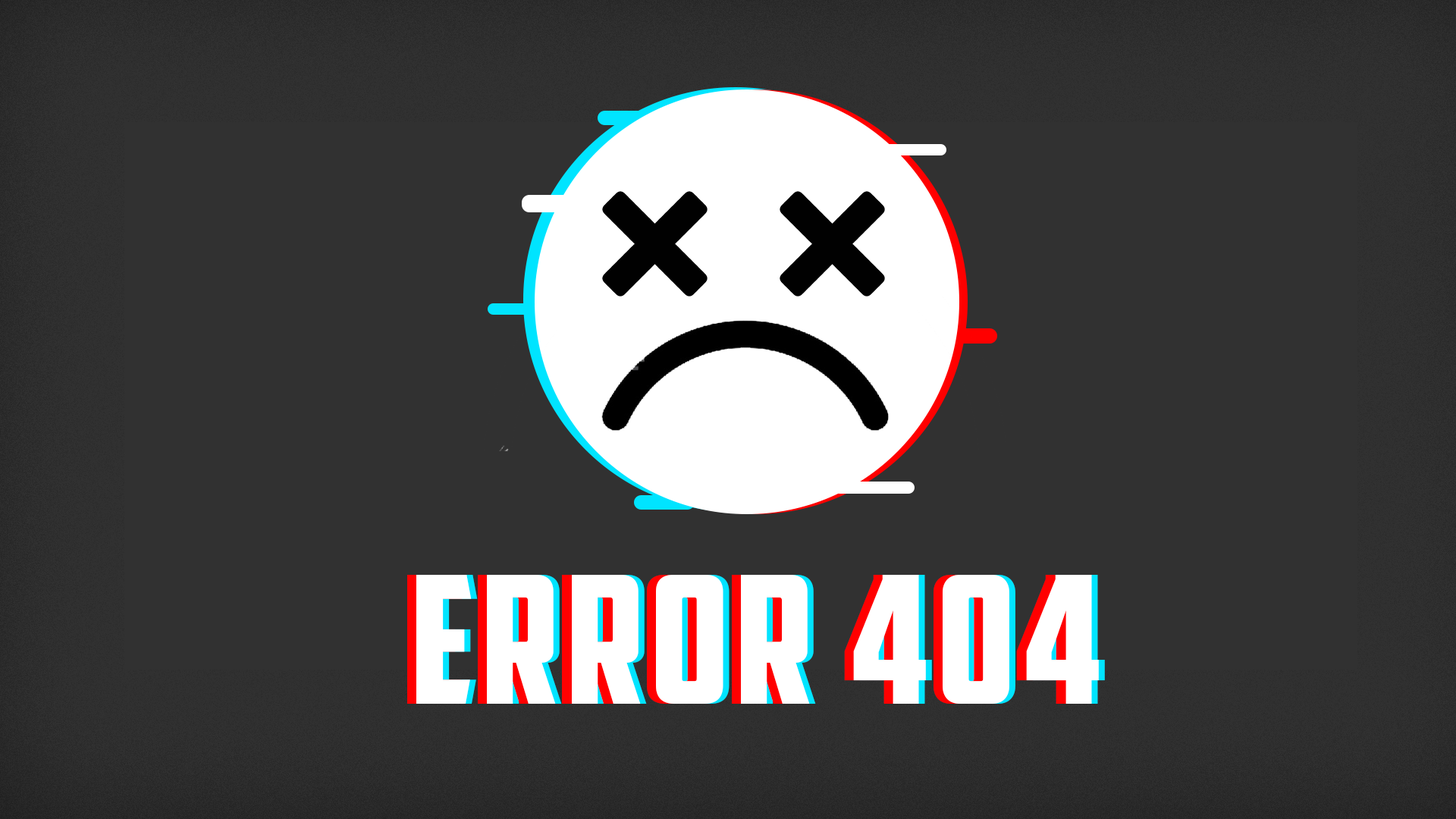
<style>
.page{position:relative;width:1456px;height:819px;background:#313131}
.page>*{position:absolute;margin:0}
.t1{font:177.6px "AmericanCaptain";letter-spacing:0.04em;color:#ffffff;text-transform:uppercase}
</style>
<div class="page">
<p class="t1" style="left:407px;top:575px;width:682px;height:129px">ERROR 404</p>
<p class="t1" style="left:416px;top:575px;width:683px;height:129px">ERROR 404</p>
<p class="t1" style="left:422px;top:575px;width:683px;height:129px">ERROR 404</p>
</div>
